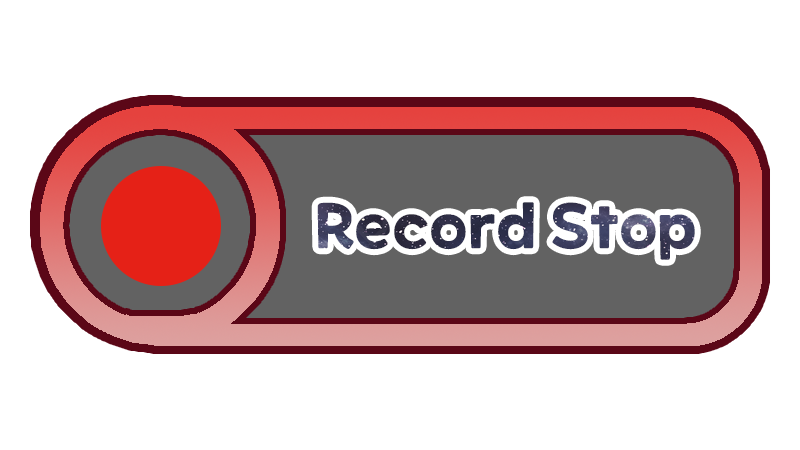
<style>
.page{position:relative;width:800px;height:450px;background:#ffffff}
.page>*{position:absolute;margin:0}
.t1{font:60px "ONEMobilePOPOTFRegular"}
</style>
<div class="page">
<p class="t1" style="left:317px;top:202px;width:378px;height:58px">Record Stop</p>
</div>
